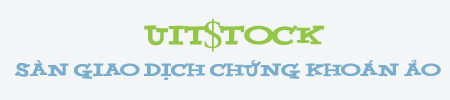
<style>
.page{position:relative;width:450px;height:100px;background:#f4f5f6}
.page>*{position:absolute;margin:0}
.t1{font:30px "VNI-Yahoo";color:#93c647}
.t2{font:40px "VnTimes";color:#93c647}
.t3{font:20px "VNI-Yahoo";color:#77adcf}
</style>
<div class="page">
<p class="t1" style="left:144px;top:25px;width:181px;height:21px">UIT   TOCK</p>
<p class="t2" style="left:204px;top:18px;width:18px;height:34px">$</p>
<p class="t3" style="left:14px;top:59px;width:427px;height:22px">saøn  giao  dòch  chöùng  khoaùn  aûo</p>
</div>
